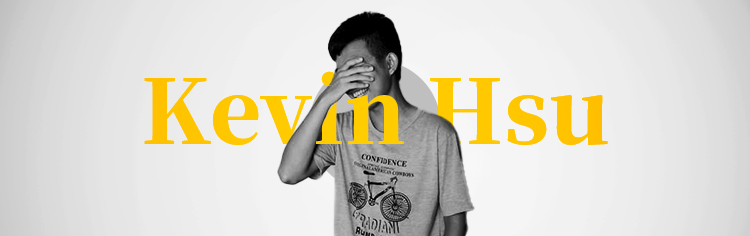
<style>
.page{position:relative;width:750px;height:236px}
.page>*{position:absolute;margin:0}
.t1{font:42.1px "NotoSerifTC-Black";color:#ffd200}
</style>
<div class="page">
<p class="t1" style="left:144px;top:71px;width:464px;height:74px">Kevin Hsu</p>
<p class="t1" style="left:144px;top:71px;width:464px;height:74px">Kevin Hsu</p>
</div>
